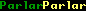
<style>
.page{position:relative;width:86px;height:11px;background:#000000}
.page>*{position:absolute;margin:0}
.t1{font:13.2px "Onesize";color:#009900;scale:0.91 1}
.t2{font:13.2px "Onesize";color:#ffff66;scale:0.91 1}
</style>
<div class="page">
<p class="t1" style="left:0px;top:1px;width:43px;height:8px">Parlar</p>
<p class="t2" style="left:43px;top:1px;width:43px;height:8px">Parlar</p>
</div>
